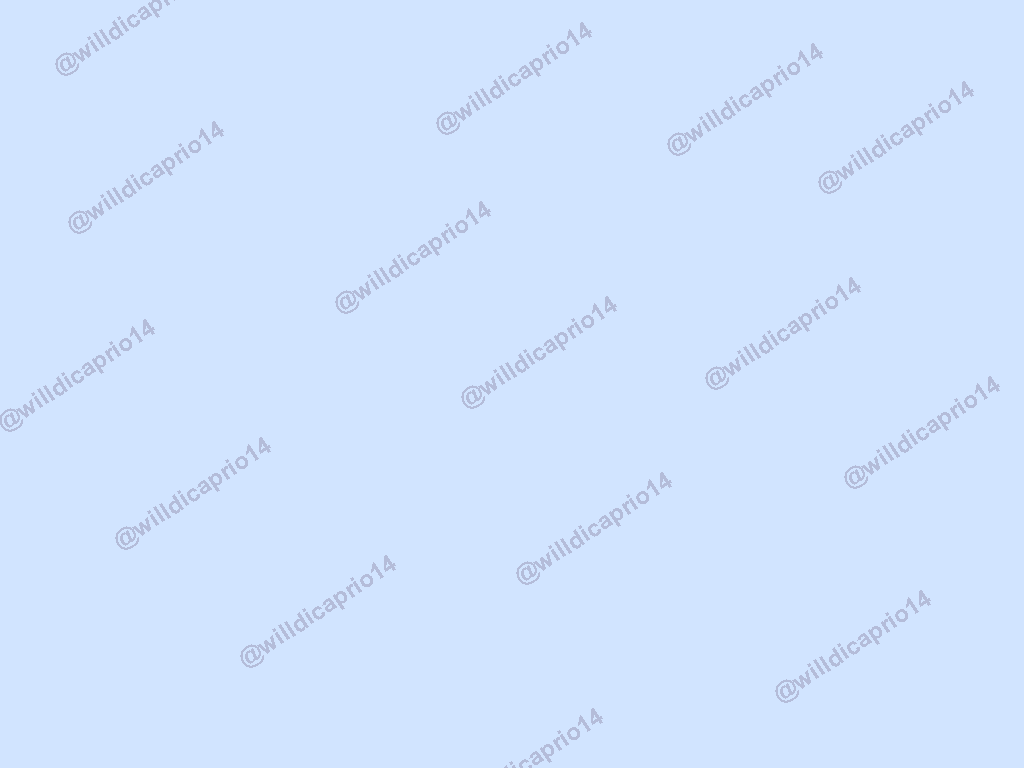
<style>
.page{position:relative;width:1024px;height:768px;background:#d1e4ff}
.page>*{position:absolute;margin:0}
.t1{font:24px "Arial-BoldMT";color:#b4bcd9}
</style>
<div class="page">
<p class="t1" style="left:436px;top:22px;width:156px;height:113px;rotate:-33deg">@willdicaprio14</p>
<p class="t1" style="left:667px;top:43px;width:156px;height:113px;rotate:-33deg">@willdicaprio14</p>
<p class="t1" style="left:818px;top:81px;width:156px;height:113px;rotate:-33deg">@willdicaprio14</p>
<p class="t1" style="left:68px;top:121px;width:156px;height:113px;rotate:-33deg">@willdicaprio14</p>
<p class="t1" style="left:335px;top:201px;width:156px;height:113px;rotate:-33deg">@willdicaprio14</p>
<p class="t1" style="left:705px;top:277px;width:156px;height:113px;rotate:-33deg">@willdicaprio14</p>
<p class="t1" style="left:461px;top:296px;width:156px;height:113px;rotate:-33deg">@willdicaprio14</p>
<p class="t1" style="left:0px;top:319px;width:155px;height:113px;rotate:-33deg">@willdicaprio14</p>
<p class="t1" style="left:844px;top:376px;width:156px;height:113px;rotate:-33deg">@willdicaprio14</p>
<p class="t1" style="left:115px;top:437px;width:156px;height:113px;rotate:-33deg">@willdicaprio14</p>
<p class="t1" style="left:516px;top:472px;width:156px;height:113px;rotate:-33deg">@willdicaprio14</p>
<p class="t1" style="left:240px;top:555px;width:156px;height:113px;rotate:-33deg">@willdicaprio14</p>
<p class="t1" style="left:775px;top:590px;width:156px;height:113px;rotate:-33deg">@willdicaprio14</p>
</div>
